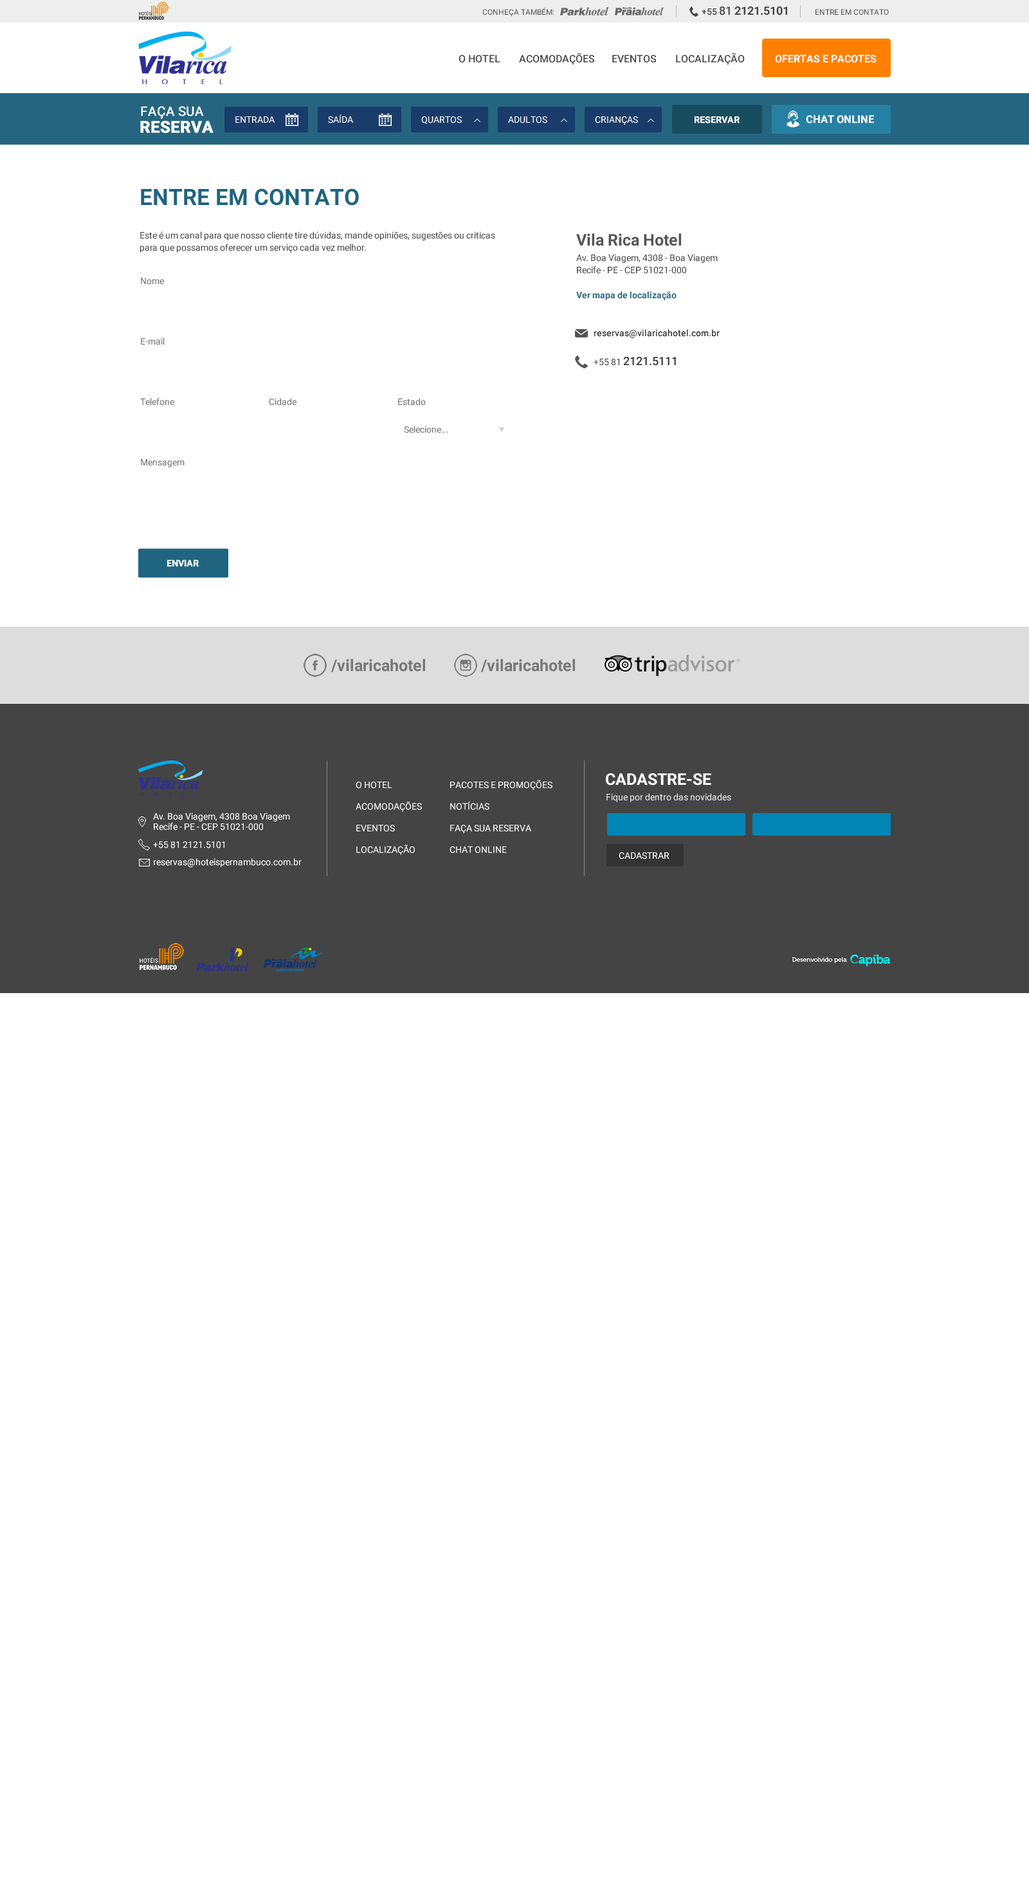
<style>
.page{position:relative;width:1029px;height:1902px;background:#ffffff}
.page>*{position:absolute;margin:0}
.t1{font:7.7px "Roboto-Regular";color:#444444}
.t2{font:11.6px "Roboto-Bold";color:#444444}
.t3{font:9px "Roboto-Medium";color:#444444}
.t4{font:11.6px "Roboto-Medium";color:#444444}
.t5{font:10.3px "Roboto-Medium";color:#444444}
.t6{font:10.3px "Roboto-Bold";color:#ffffff}
.t7{font:12.9px "Roboto-Regular";color:#ffffff;font-weight:bold}
.t8{font:16.1px "Roboto-Bold";color:#ffffff;font-weight:bold}
.t9{font:9px "Roboto-Regular";color:#ffffff}
.t10{font:9px "Roboto-Medium";color:#ffffff;font-weight:bold}
.t11{font:10.3px "Roboto-Medium";color:#ffffff;font-weight:bold}
.t12{font:22.5px "Roboto-Bold";color:#1f657f}
.t13{font:9px/12.6px "Roboto-Regular";color:#333333}
.t14{font:16.1px "Roboto-Bold";color:#545454}
.t15{font:9px/12.6px "Roboto-Bold";color:#1f657f}
.t16{font:9px/12.6px "Roboto-Medium";color:#333333}
.t17{font:11.6px/16.2px "Roboto-Medium";color:#333333}
.t18{font:9px "Roboto-Regular";color:#666666}
.t19{font:16.1px "Roboto-Bold";color:#ffffff}
.t20{font:9px/10.8px "Roboto-Regular";color:#ffffff}
.t21{font:9px "Roboto-Regular";color:#eeeeee}
</style>
<div class="page">
<p class="t1" style="left:482px;top:8px;width:72px;height:9px">CONHEÇA TAMBÉM:</p>
<p class="t2" style="left:701px;top:6px;width:86px;height:9px"><span class="t3">+55 </span><span class="t4">81 </span>2121.5101</p>
<p class="t1" style="left:815px;top:9px;width:73px;height:6px">ENTRE EM CONTATO</p>
<p class="t5" style="left:519px;top:53px;width:76px;height:12px">ACOMODAÇÕES</p>
<p class="t5" style="left:676px;top:53px;width:68px;height:12px">LOCALIZAÇÃO</p>
<p class="t5" style="left:458px;top:55px;width:42px;height:8px">O HOTEL</p>
<p class="t5" style="left:612px;top:55px;width:44px;height:8px">EVENTOS</p>
<p class="t6" style="left:775px;top:55px;width:101px;height:8px">OFERTAS E PACOTES</p>
<p class="t7" style="left:141px;top:106px;width:63px;height:13px">FAÇA SUA</p>
<p class="t8" style="left:140px;top:121px;width:73px;height:12px">RESERVA</p>
<p class="t9" style="left:235px;top:116px;width:39px;height:7px">ENTRADA</p>
<p class="t9" style="left:328px;top:114px;width:25px;height:9px">SAÍDA</p>
<p class="t9" style="left:421px;top:116px;width:41px;height:8px">QUARTOS</p>
<p class="t9" style="left:508px;top:116px;width:39px;height:7px">ADULTOS</p>
<p class="t9" style="left:595px;top:116px;width:43px;height:9px">CRIANÇAS</p>
<p class="t10" style="left:694px;top:116px;width:45px;height:7px">RESERVAR</p>
<p class="t11" style="left:806px;top:115px;width:68px;height:8px">CHAT ONLINE</p>
<p class="t12" style="left:141px;top:188px;width:218px;height:18px">ENTRE EM CONTATO</p>
<p class="t13" style="left:140px;top:231px;width:355px;height:22px">Este é um canal para que nosso cliente tire dúvidas, mande opiniões, sugestões ou criticas para que possamos oferecer um serviço cada vez melhor.</p>
<p class="t14" style="left:576px;top:233px;width:105px;height:13px">Vila Rica Hotel</p>
<p class="t13" style="left:576px;top:254px;width:143px;height:112px">Av. Boa Viagem, 4308 - Boa Viagem<br>Recife - PE - CEP 51021-000<br><br><span class="t15">Ver mapa de localização<br><br><br>         </span><span class="t16">reservas@vilaricahotel.com.br<br></span> <br>         +55 81 <span class="t17">2121.5111</span></p>
<p class="t18" style="left:141px;top:278px;width:23px;height:7px">Nome</p>
<p class="t18" style="left:141px;top:338px;width:24px;height:7px">E-mail</p>
<p class="t18" style="left:140px;top:398px;width:34px;height:8px">Telefone</p>
<p class="t18" style="left:269px;top:398px;width:27px;height:8px">Cidade</p>
<p class="t18" style="left:398px;top:398px;width:28px;height:8px">Estado</p>
<p class="t18" style="left:404px;top:426px;width:44px;height:7px">Selecione...</p>
<p class="t18" style="left:141px;top:459px;width:43px;height:8px">Mensagem</p>
<p class="t10" style="left:167px;top:560px;width:32px;height:7px">ENVIAR</p>
<p class="t19" style="left:606px;top:773px;width:105px;height:13px">CADASTRE-SE</p>
<p class="t20" style="left:356px;top:782px;width:66px;height:73px">O HOTEL<br><br>ACOMODAÇÕES<br><br>EVENTOS<br><br>LOCALIZAÇÃO</p>
<p class="t20" style="left:449px;top:780px;width:103px;height:73px">PACOTES E PROMOÇÕES<br><br>NOTÍCIAS<br><br>FAÇA SUA RESERVA<br><br>CHAT ONLINE</p>
<p class="t21" style="left:606px;top:793px;width:125px;height:9px">Fique por dentro das novidades</p>
<p class="t20" style="left:153px;top:813px;width:137px;height:18px">Av. Boa Viagem, 4308 Boa Viagem<br>Recife - PE - CEP 51021-000</p>
<p class="t9" style="left:153px;top:842px;width:71px;height:7px">+55 81 2121.5101</p>
<p class="t9" style="left:618px;top:852px;width:51px;height:8px">CADASTRAR</p>
<p class="t9" style="left:154px;top:858px;width:148px;height:10px">reservas@hoteispernambuco.com.br</p>
</div>
